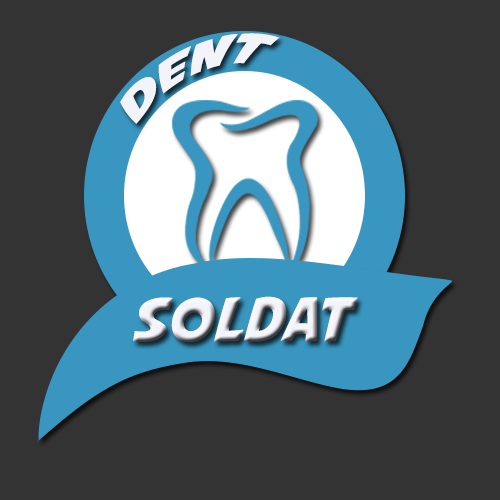
<style>
.page{position:relative;width:500px;height:500px;background:#333333}
.page>*{position:absolute;margin:0}
.t1{font:37.4px "AvengeanceMightiestAvenger";color:#f3f3fa;scale:1.28 1}
.t2{font:60px "AvengeanceMightiestAvenger";color:#f3f3fa}
</style>
<div class="page">
<p class="t1" style="left:120px;top:33px;width:160px;height:91px;rotate:-25deg">dent</p>
<p class="t2" style="left:133px;top:296px;width:225px;height:47px">Soldat</p>
</div>
